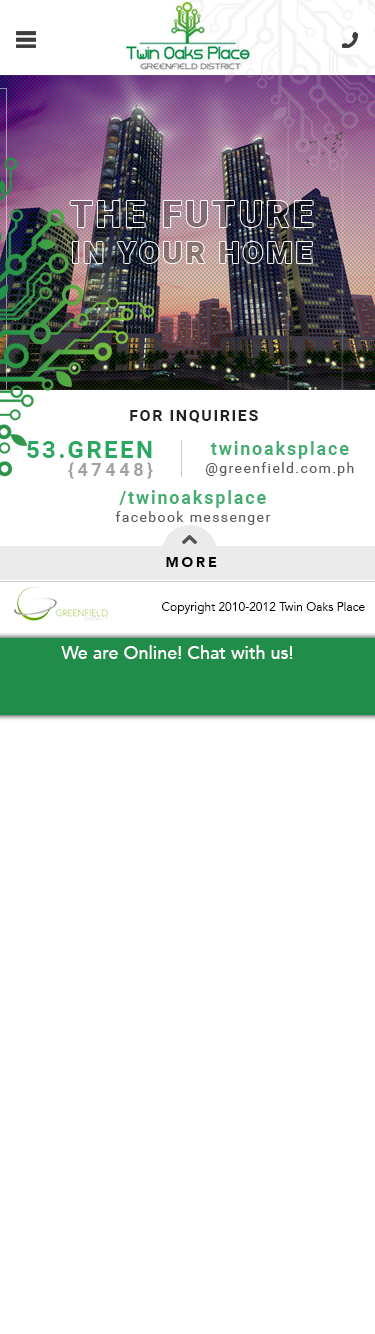
<style>
.page{position:relative;width:375px;height:1334px;background:#ffffff}
.page>*{position:absolute;margin:0}
.t1{font:16px "Roboto-Bold";letter-spacing:0.1em;color:#212121;text-transform:uppercase}
.t2{font:24px "Roboto-Bold";letter-spacing:0.1em;color:#2ba962;text-transform:uppercase}
.t3{font:18px/18px "Roboto-Bold";letter-spacing:0.2em;color:#a2a1a1;text-transform:uppercase}
.t4{font:14px/18px "Roboto-Regular";letter-spacing:0.1em;color:#5c5c5c}
.t5{font:18px/18px "Roboto-Bold";letter-spacing:0.1em;color:#42af70}
.t6{font:14px "Avenir-Black";letter-spacing:0.2em;color:#000000}
.t7{font:12px "Avenir-Book";color:#000000}
.t8{font:18px "Avenir-Medium";color:#ffffff}
</style>
<div class="page">
<p class="t1" style="left:130px;top:410px;width:128px;height:13px">For Inquiries</p>
<p class="t2" style="left:27px;top:441px;width:126px;height:38px">53.GREEN<br>     <span class="t3">{47448}</span></p>
<p class="t4" style="left:205px;top:441px;width:149px;height:35px;text-align:center"><span class="t5">twinoaksplace<br></span>@greenfield.com.ph</p>
<p class="t4" style="left:115px;top:490px;width:156px;height:35px;text-align:center"><span class="t5">/twinoaksplace<br></span>facebook messenger</p>
<p class="t6" style="left:166px;top:557px;width:51px;height:10px">MORE</p>
<p class="t7" style="left:161px;top:602px;width:204px;height:12px">Copyright 2010-2012 Twin Oaks Place</p>
<p class="t8" style="left:61px;top:645px;width:232px;height:14px">We are Online! Chat with us!</p>
</div>
